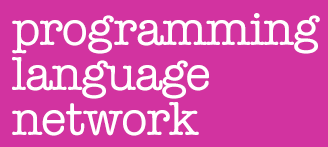
<style>
.page{position:relative;width:328px;height:147px;background:#d233a0}
.page>*{position:absolute;margin:0}
.t1{font:48px/45px "AmericanTypewriter";letter-spacing:-0.02em;color:#ffffff}
</style>
<div class="page">
<p class="t1" style="left:12px;top:13px;width:308px;height:123px">programming<br>language<br>network</p>
</div>
